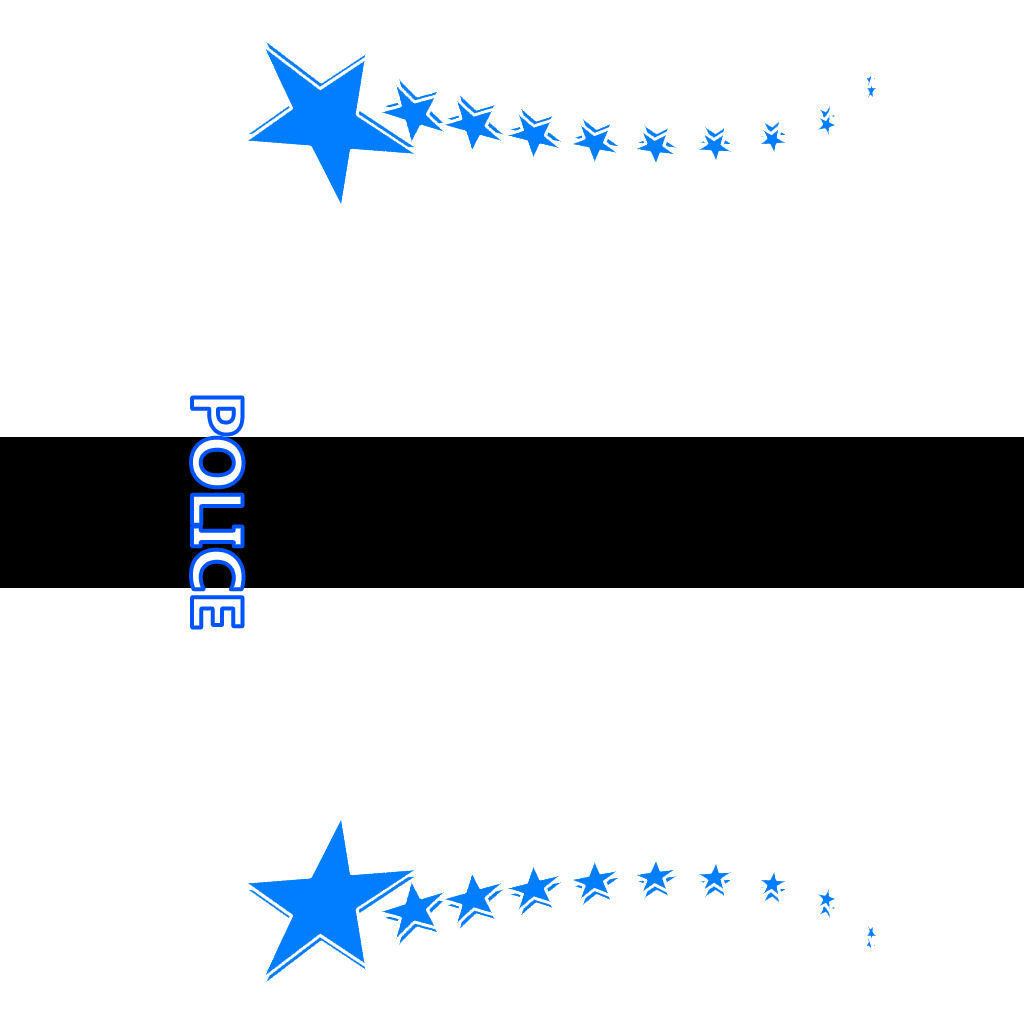
<style>
.page{position:relative;width:1024px;height:1024px;background:#ffffff}
.page>*{position:absolute;margin:0}
.t1{font:72px "MicrosoftTaiLe-Bold";letter-spacing:-0.01em;text-transform:uppercase}
</style>
<div class="page">
<p class="t1" style="left:191px;top:397px;width:53px;height:231px;rotate:90deg">police</p>
</div>
